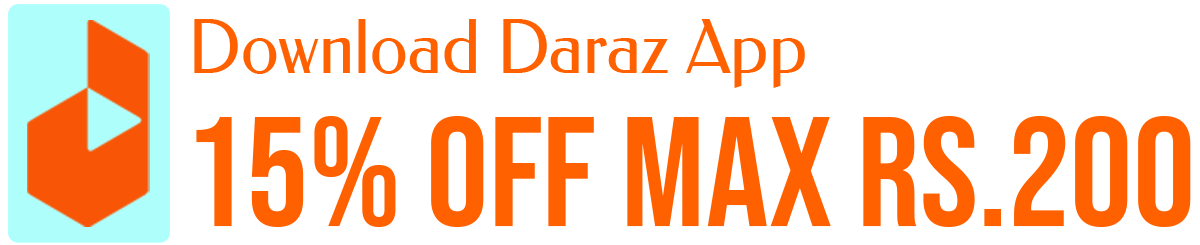
<style>
.page{position:relative;width:1200px;height:245px;background:#ffffff}
.page>*{position:absolute;margin:0}
.t1{font:74.5px "Federo-Regular";color:#ff6000;scale:0.93 1}
.t2{font:156.4px "BebasNeue-Regular";color:#ff6000}
</style>
<div class="page">
<p class="t1" style="left:194px;top:19px;width:611px;height:69px">Download Daraz App</p>
<p class="t2" style="left:196px;top:116px;width:995px;height:111px">15% Off Max Rs.200</p>
</div>
